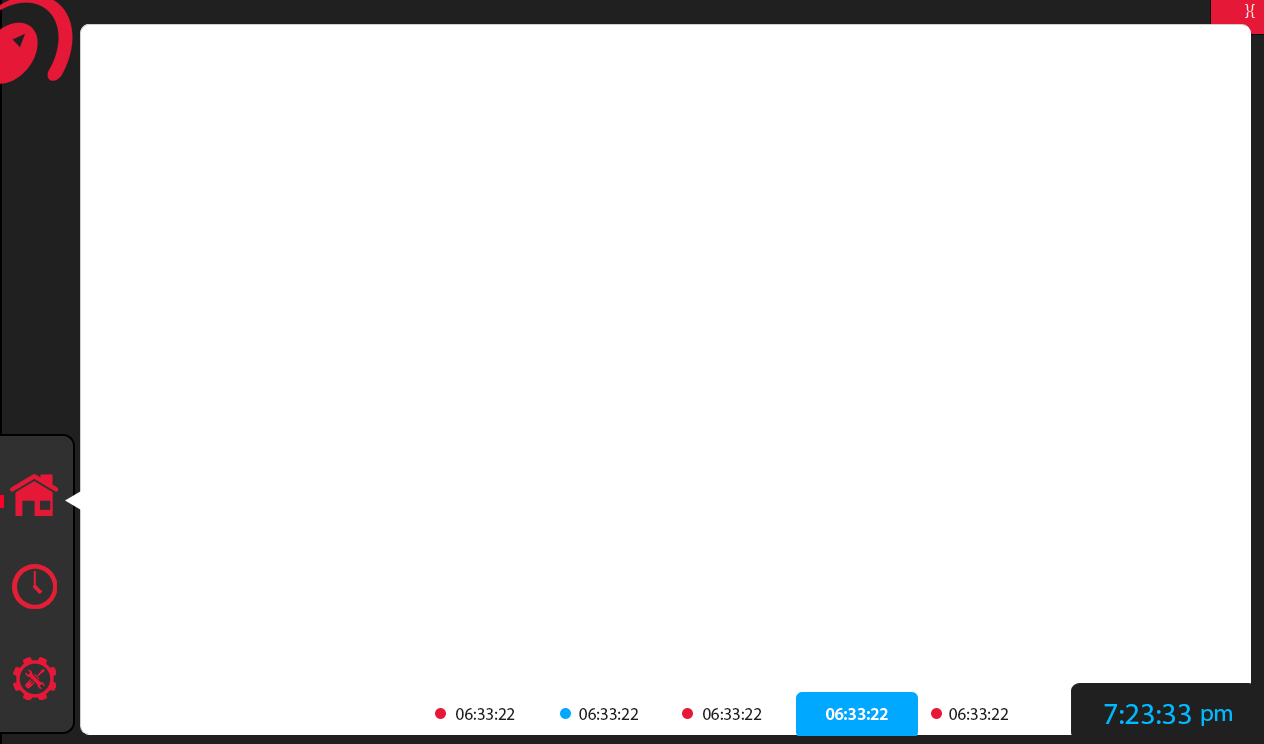
<style>
.page{position:relative;width:1264px;height:744px;background:#ffffff}
.page>*{position:absolute;margin:0}
.t1{font:17.4px "MyriadPro-Regular";color:#202020}
.t2{font:17.4px "MyriadPro-Semibold";color:#ffffff}
.t3{font:30px "MyriadPro-Regular";color:#00baff}
.t4{font:24px "MyriadPro-Regular";color:#00baff}
</style>
<div class="page">
<p class="t1" style="left:456px;top:708px;width:59px;height:12px">06:33:22</p>
<p class="t1" style="left:579px;top:708px;width:59px;height:12px">06:33:22</p>
<p class="t1" style="left:703px;top:708px;width:59px;height:12px">06:33:22</p>
<p class="t2" style="left:826px;top:708px;width:62px;height:12px">06:33:22</p>
<p class="t1" style="left:949px;top:708px;width:59px;height:12px">06:33:22</p>
<p class="t3" style="left:1104px;top:704px;width:87px;height:20px">7:23:33</p>
<p class="t4" style="left:1201px;top:709px;width:31px;height:17px">pm</p>
</div>
